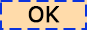
<style>
.page{position:relative;width:87px;height:30px;background:#ffdbaa}
.page>*{position:absolute;margin:0}
.t1{font:21px "Verdana";color:#000000;font-weight:bold}
</style>
<div class="page">
<p class="t1" style="left:28px;top:6px;width:32px;height:17px">OK</p>
</div>
